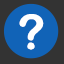
<style>
.page{position:relative;width:64px;height:64px;background:#1163b7}
.page>*{position:absolute;margin:0}
.t1{font:48px "ArialRoundedMTBold";color:#ffffff}
</style>
<div class="page">
<p class="t1" style="left:19px;top:14px;width:25px;height:36px">?</p>
</div>
